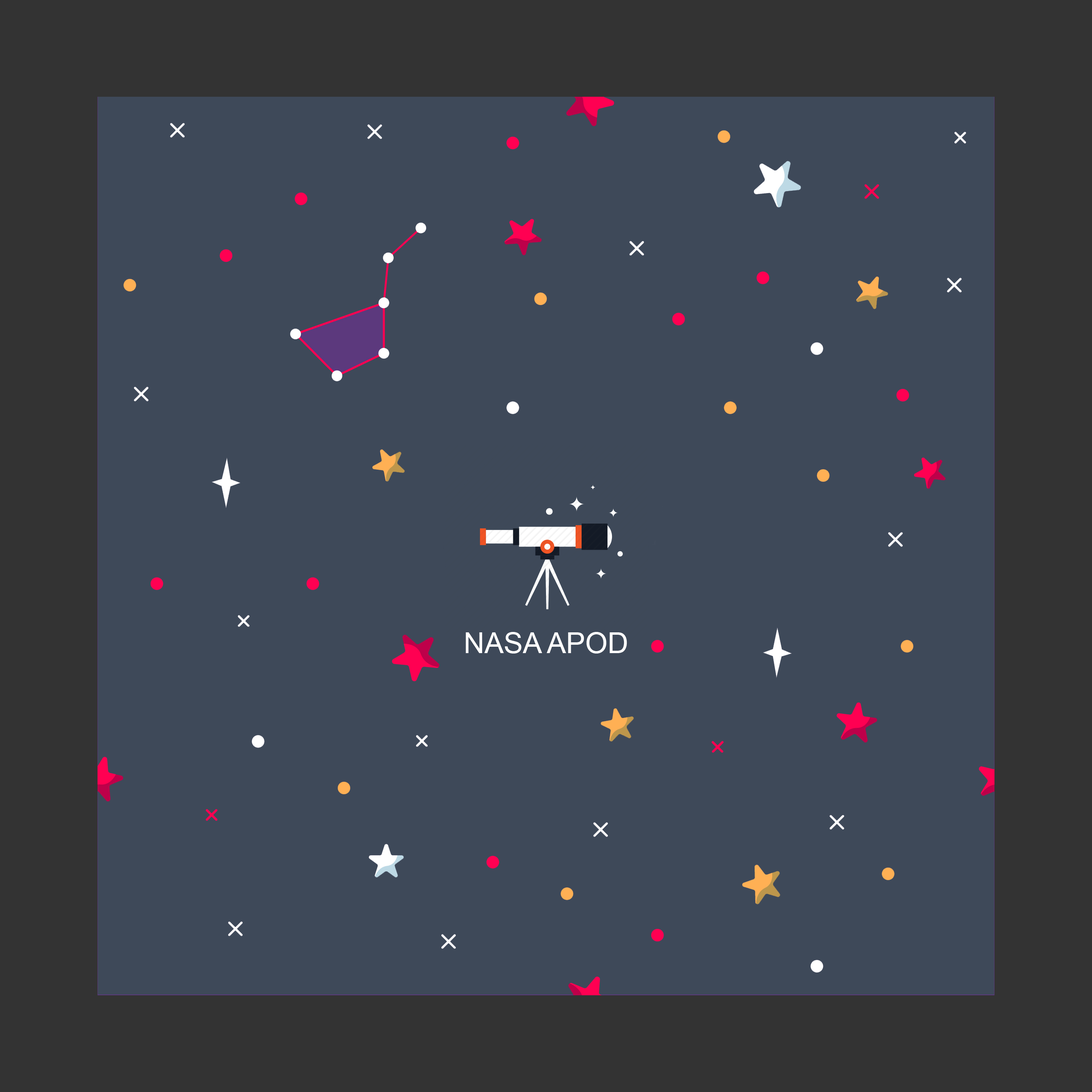
<style>
.page{position:relative;width:1092px;height:1092px;background:#3e4959}
.page>*{position:absolute;margin:0}
.t1{font:28.8px "ArialMT";color:#ffffff}
</style>
<div class="page">
<p class="t1" style="left:466px;top:632px;width:161px;height:22px">NASA APOD</p>
</div>
